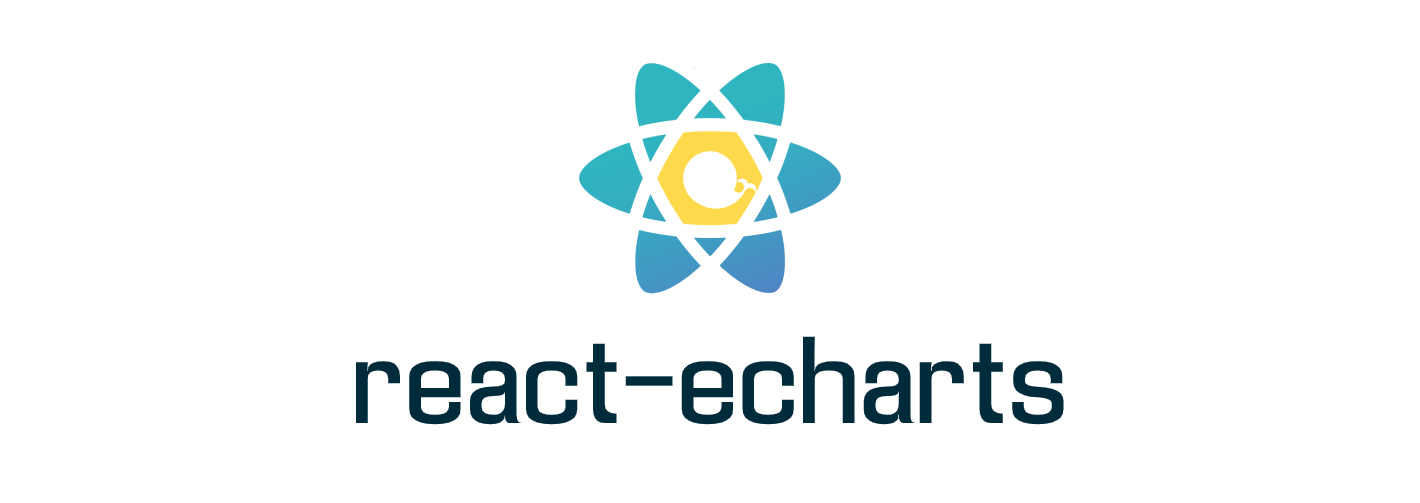
<style>
.page{position:relative;width:1420px;height:503px;background:#ffffff}
.page>*{position:absolute;margin:0}
.t1{font:112px "Enigmatic";color:#002b3b}
</style>
<div class="page">
<p class="t1" style="left:356px;top:336px;width:708px;height:89px">react-echarts</p>
</div>
